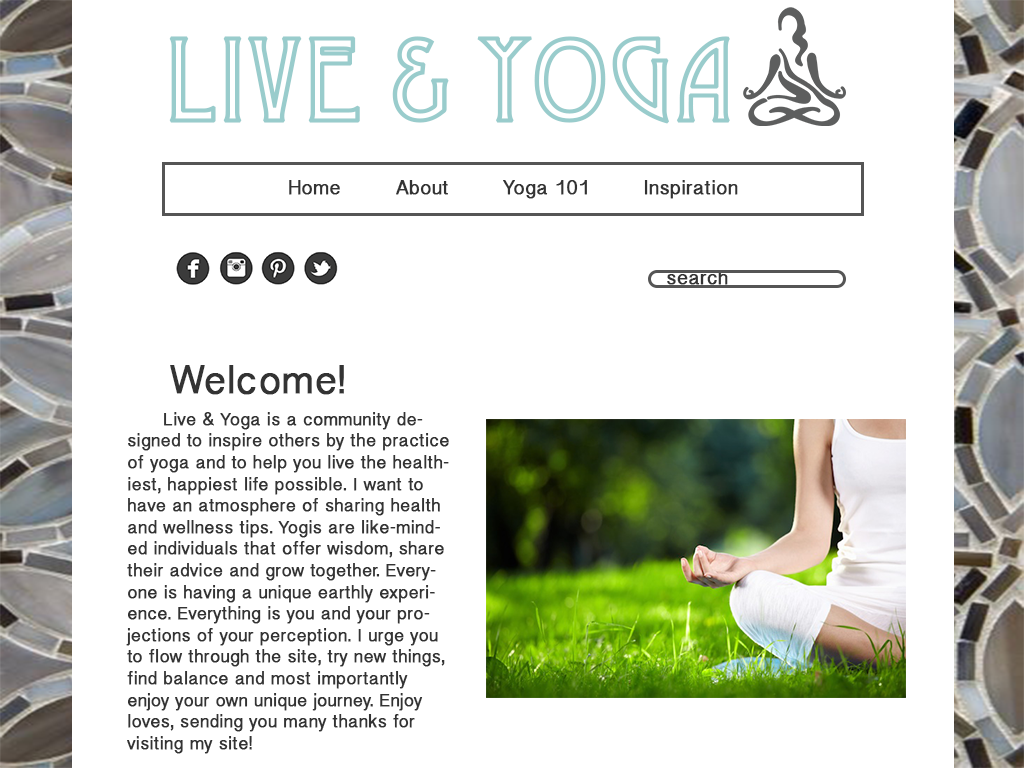
<style>
.page{position:relative;width:1024px;height:768px;background:#ffffff}
.page>*{position:absolute;margin:0}
.t1{font:113px "Desdemona";color:#99cccc;font-weight:bold}
.t2{font:20px "KhmerSangamMN";color:#333333;font-weight:bold}
.t3{font:40px "KhmerSangamMN";color:#333333;font-weight:bold}
.t4{font:18px "KhmerSangamMN";color:#333333;font-weight:bold}
</style>
<div class="page">
<p class="t1" style="left:169px;top:36px;width:561px;height:88px">Live &amp; Yoga</p>
<p class="t2" style="left:289px;top:180px;width:51px;height:15px">Home</p>
<p class="t2" style="left:396px;top:180px;width:52px;height:15px">About</p>
<p class="t2" style="left:503px;top:180px;width:84px;height:19px">Yoga 101</p>
<p class="t2" style="left:644px;top:180px;width:94px;height:19px">Inspiration</p>
<p class="t2" style="left:667px;top:270px;width:61px;height:15px">search</p>
<p class="t3" style="left:170px;top:365px;width:174px;height:30px">Welcome!</p>
<p class="t4" style="left:126px;top:412px;width:323px;height:342px">Live &amp; Yoga is a community designed to inspire others by the practice of yoga and to help you live the healthiest, happiest life possible. I want to have an atmosphere of sharing health and wellness tips. Yogis are like-minded individuals that offer wisdom, share their advice and grow together. Everyone is having a unique earthly experience. Everything is you and your projections of your perception. I urge you to flow through the site, try new things, find balance and most importantly enjoy your own unique journey. Enjoy loves, sending you many thanks for visiting my site!</p>
</div>
